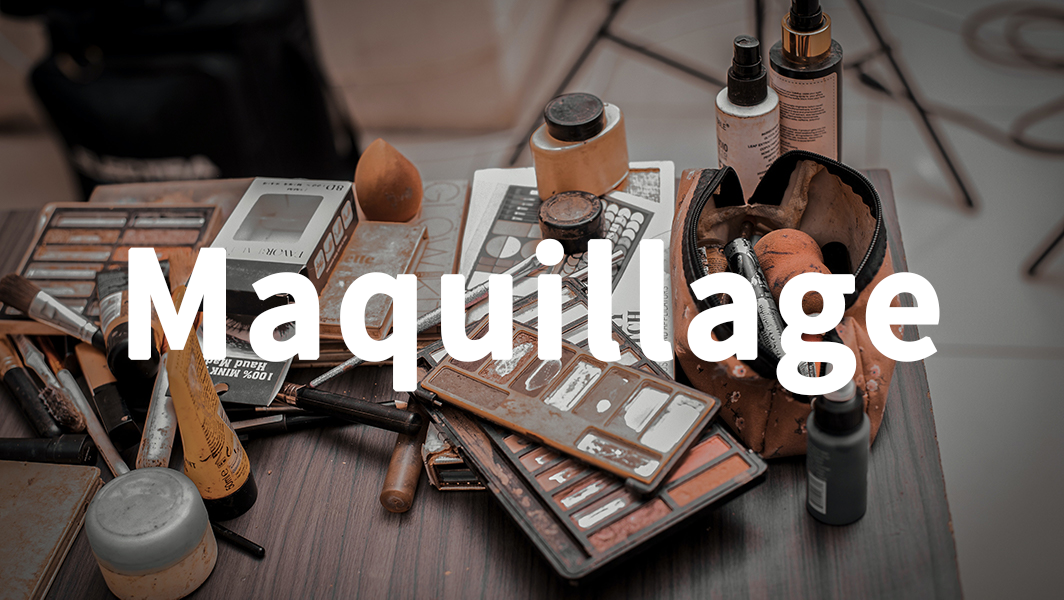
<style>
.page{position:relative;width:1064px;height:600px}
.page>*{position:absolute;margin:0}
.t1{font:163px "SourceSansPro-Semibold";letter-spacing:0.025em;color:#ffffff;font-weight:bold}
</style>
<div class="page">
<p class="t1" style="left:128px;top:238px;width:812px;height:158px">Maquillage</p>
</div>
